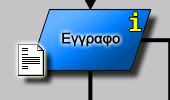
<style>
.page{position:relative;width:170px;height:100px;background:#c6c3c6}
.page>*{position:absolute;margin:0}
.t1{font:14.7px "ArialMT";color:#000000}
</style>
<div class="page">
<p class="t1" style="left:62px;top:32px;width:58px;height:15px">Εγγραφο</p>
</div>
